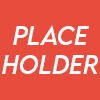
<style>
.page{position:relative;width:100px;height:100px;background:#e74c3c}
.page>*{position:absolute;margin:0}
.t1{font:24px "LEMONMILK-RegularItalic";color:#ffffff}
</style>
<div class="page">
<p class="t1" style="left:2px;top:25px;width:96px;height:49px;text-align:center">PLACE<br>HOLDER</p>
</div>
